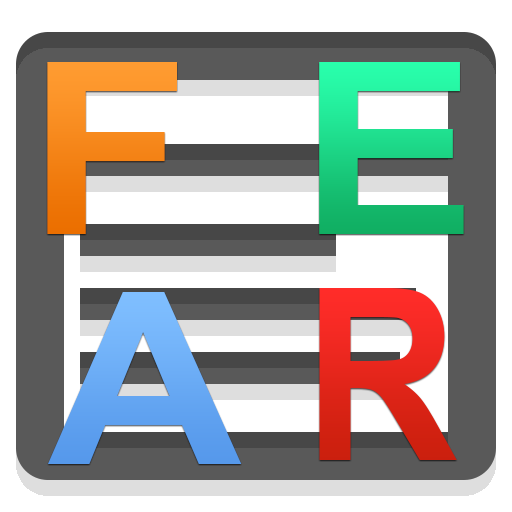
<style>
.page{position:relative;width:512px;height:512px;background:#ffffff}
.page>*{position:absolute;margin:0}
.t1{font:239.8px "Arial-BoldMT";color:#f7891d;scale:1.1 1}
.t2{font:240px "Arial-BoldMT";scale:1.1 1}
.t3{font:240px "Arial-BoldMT";color:#65a6f2;scale:1.12 1}
.t4{font:240px "Arial-BoldMT";color:#e7261c;scale:0.89 1}
</style>
<div class="page">
<p class="t1" style="left:47px;top:62px;width:130px;height:172px">F</p>
<p class="t2" style="left:319px;top:62px;width:145px;height:172px">E</p>
<p class="t3" style="left:48px;top:292px;width:194px;height:172px">A</p>
<p class="t4" style="left:319px;top:288px;width:138px;height:172px">R</p>
</div>
